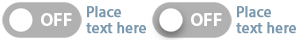
<style>
.page{position:relative;width:300px;height:40px;background:#ffffff}
.page>*{position:absolute;margin:0}
.t1{font:15.4px/15.4px "MyriadPro-Regular";color:#7b99ae;font-weight:bold}
.t2{font:18.5px "MyriadPro-Bold";color:#ffffff}
</style>
<div class="page">
<p class="t1" style="left:86px;top:6px;width:60px;height:28px">Place text here</p>
<p class="t1" style="left:236px;top:6px;width:60px;height:28px">Place text here</p>
<p class="t2" style="left:41px;top:13px;width:31px;height:13px">OFF</p>
<p class="t2" style="left:191px;top:13px;width:31px;height:13px">OFF</p>
</div>
